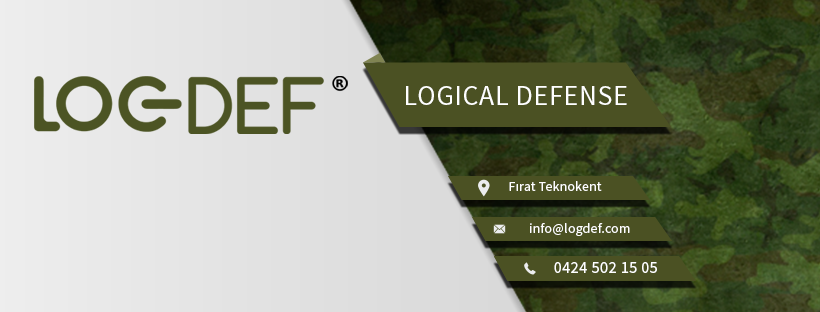
<style>
.page{position:relative;width:820px;height:312px}
.page>*{position:absolute;margin:0}
.t1{font:27.9px "SourceSansPro-Regular";letter-spacing:0.025em;color:#ffffff}
.t2{font:13.6px "SourceSansPro-Regular";letter-spacing:0.025em;color:#ffffff}
.t3{font:16.3px "SourceSansPro-Regular";letter-spacing:0.025em;color:#ffffff}
</style>
<div class="page">
<p class="t1" style="left:406px;top:86px;width:221px;height:19px">LOGICAL DEFENSE</p>
<p class="t2" style="left:509px;top:181px;width:93px;height:10px">Fırat Teknokent</p>
<p class="t2" style="left:530px;top:223px;width:100px;height:13px">info@logdef.com</p>
<p class="t3" style="left:554px;top:262px;width:103px;height:11px">0424 502 15 05</p>
</div>
